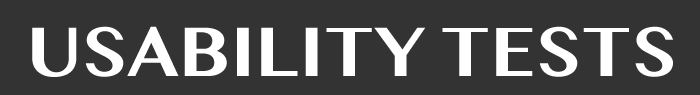
<style>
.page{position:relative;width:700px;height:95px;background:#333333}
.page>*{position:absolute;margin:0}
.t1{font:69.4px "MalayalamMN-Bold";color:#ffffff;text-transform:uppercase}
</style>
<div class="page">
<p class="t1" style="left:32px;top:26px;width:641px;height:51px">usability tests</p>
</div>
